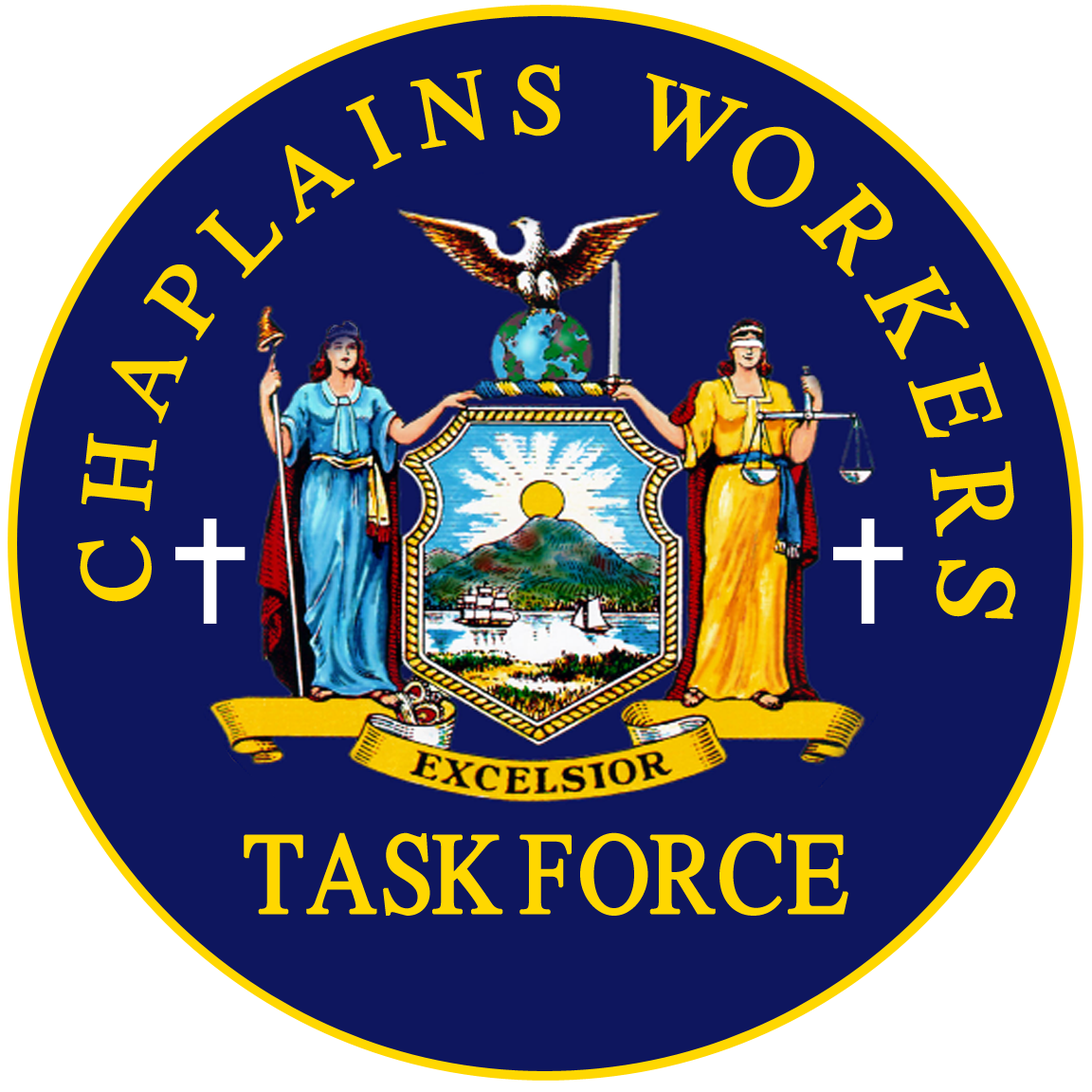
<style>
.page{position:relative;width:1092px;height:1092px;background:#0e165e}
.page>*{position:absolute;margin:0}
.t1{font:99.4px "OpusChords";color:#ffd700;font-weight:bold}
.t2{font:103.4px "OpusChords";color:#ffd700;font-weight:bold;scale:1.07 1}
.t3{font:115.2px "OpusChords";color:#ffd700;font-weight:bold}
.t4{font:99.7px "OpusChords";color:#ffd700;font-weight:bold}
.t5{font:109.5px "OpusChords";color:#ffd700;font-weight:bold}
.t6{font:100.5px "OpusChords";color:#ffd700;font-weight:bold}
.t7{font:110.5px "OpusChords";color:#ffd700;font-weight:bold;scale:0.95 1}
.t8{font:114.6px "OpusChords";color:#ffd700;font-weight:bold;scale:0.89 1}
.t9{font:117.1px "OpusChords";color:#ffd700;font-weight:bold;scale:0.87 1}
.t10{font:110.8px "OpusChords";color:#ffd700;font-weight:bold;scale:1.09 1}
.t11{font:115.9px "OpusChords";color:#ffd700;font-weight:bold;scale:0.85 1}
</style>
<div class="page">
<p class="t1" style="left:513px;top:64px;width:47px;height:72px;rotate:3deg">S</p>
<p class="t1" style="left:409px;top:69px;width:76px;height:81px;rotate:-10deg">N</p>
<p class="t2" style="left:646px;top:72px;width:102px;height:90px;rotate:17deg">W</p>
<p class="t1" style="left:346px;top:95px;width:56px;height:75px;rotate:-25deg">I</p>
<p class="t3" style="left:732px;top:126px;width:82px;height:82px;rotate:12deg">O</p>
<p class="t4" style="left:284px;top:145px;width:71px;height:79px;rotate:-36deg">A</p>
<p class="t5" style="left:801px;top:182px;width:92px;height:95px;rotate:45deg">R</p>
<p class="t6" style="left:195px;top:209px;width:88px;height:70px;rotate:-46deg">L</p>
<p class="t1" style="left:143px;top:264px;width:72px;height:77px;rotate:-55deg">P</p>
<p class="t7" style="left:864px;top:265px;width:106px;height:95px;rotate:60deg">K</p>
<p class="t1" style="left:111px;top:355px;width:77px;height:69px;rotate:-68deg">A</p>
<p class="t8" style="left:908px;top:362px;width:95px;height:76px;rotate:71deg">E</p>
<p class="t1" style="left:81px;top:432px;width:76px;height:80px;rotate:-84deg">H</p>
<p class="t9" style="left:930px;top:461px;width:84px;height:76px;rotate:84deg">R</p>
<p class="t1" style="left:78px;top:536px;width:74px;height:66px;rotate:-97deg">C</p>
<p class="t10" style="left:936px;top:559px;width:80px;height:60px;rotate:96deg">S</p>
<p class="t11" style="left:244px;top:832px;width:604px;height:84px">TASK FORCE</p>
</div>
